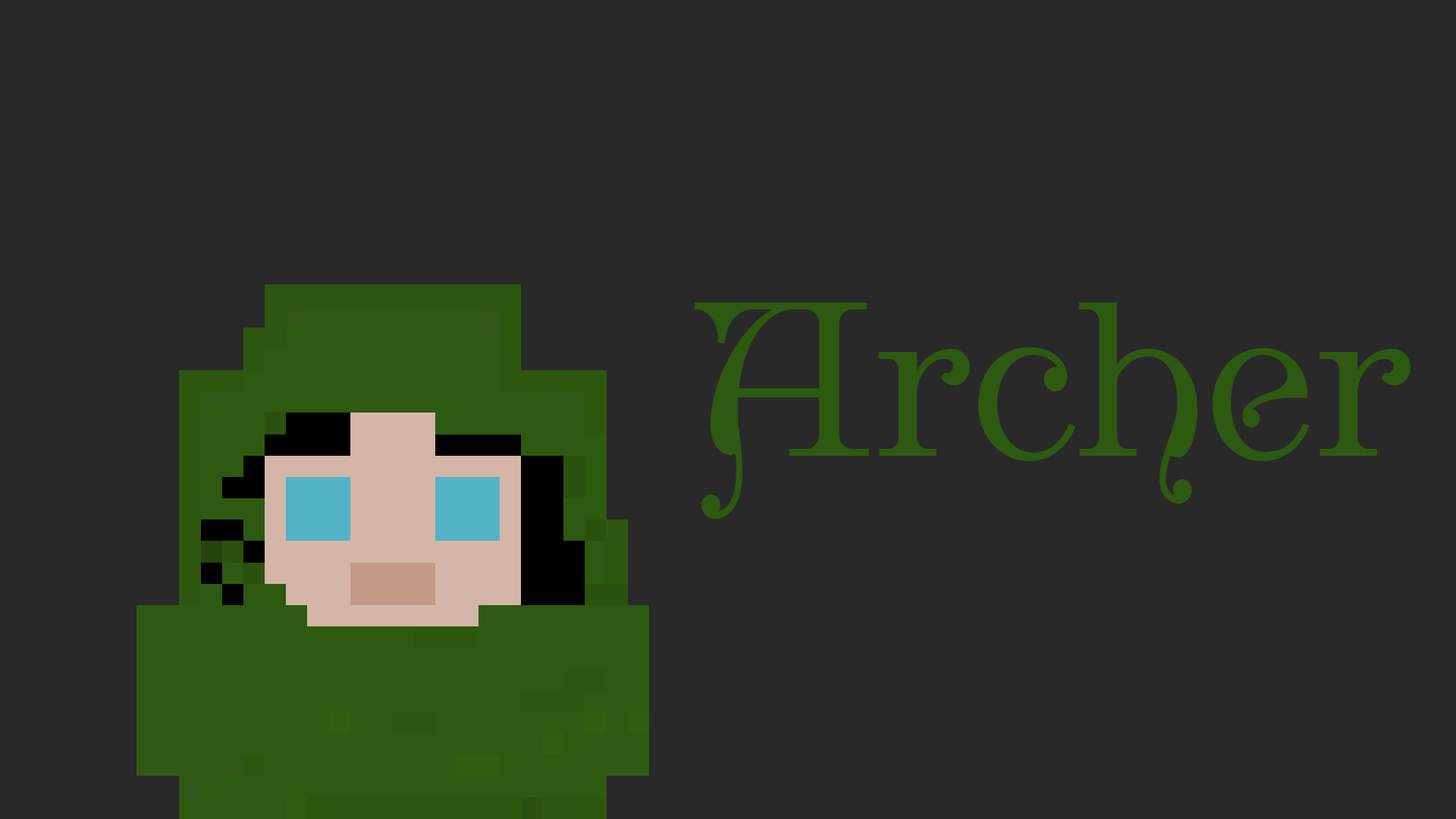
<style>
.page{position:relative;width:1456px;height:819px;background:#292929}
.page>*{position:absolute;margin:0}
.t1{font:240px "Antikvarika";color:#2e5910}
</style>
<div class="page">
<p class="t1" style="left:694px;top:303px;width:716px;height:216px">Archer</p>
</div>
